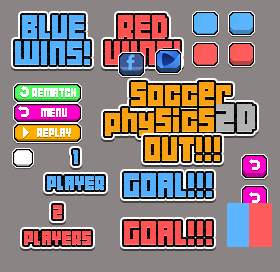
<style>
.page{position:relative;width:280px;height:272px;background:#8a8484}
.page>*{position:absolute;margin:0}
.t1{font:30px/26px "04b19";color:#53b0ff}
.t2{font:30px/26px "04b19";color:#ff5353}
.t3{font:11px "04b19";color:#fefefe}
.t4{font:30px/26px "04b19";color:#faa013}
.t5{font:36px/26px "04b19";color:#faa013}
.t6{font:36px/26px "04b19";color:#b1b1b1}
.t7{font:30px "04b19";color:#faa013}
.t8{font:18px/26px "04b19";color:#53b0ff}
.t9{font:30px "04b19";color:#53b0ff}
.t10{font:18px/26px "04b19";color:#ff5353}
.t11{font:30px "04b19";color:#ff5353}
</style>
<div class="page">
<p class="t1" style="left:15px;top:15px;width:75px;height:50px;text-align:center">BLUE<br>WINS!</p>
<p class="t1" style="left:15px;top:15px;width:75px;height:50px;text-align:center">BLUE<br>WINS!</p>
<p class="t2" style="left:105px;top:15px;width:75px;height:50px;text-align:center">RED<br>WINS!</p>
<p class="t2" style="left:105px;top:15px;width:75px;height:50px;text-align:center">RED<br>WINS!</p>
<p class="t3" style="left:32px;top:88px;width:44px;height:9px">REMATCH</p>
<p class="t4" style="left:105px;top:82px;width:150px;height:54px;text-align:center">Soccer<br>physics<span class="t5">2D</span></p>
<p class="t4" style="left:105px;top:82px;width:150px;height:54px;text-align:center">Soccer<br>physics<span class="t6">2D</span></p>
<p class="t3" style="left:41px;top:108px;width:26px;height:9px">MENU</p>
<p class="t3" style="left:37px;top:128px;width:34px;height:9px">REPLAY</p>
<p class="t7" style="left:145px;top:137px;width:75px;height:24px">OUT!!!</p>
<p class="t7" style="left:145px;top:137px;width:75px;height:24px">OUT!!!</p>
<p class="t8" style="left:47px;top:150px;width:57px;height:40px;text-align:center">1<br>PLAYER</p>
<p class="t8" style="left:47px;top:150px;width:57px;height:40px;text-align:center">1<br>PLAYER</p>
<p class="t9" style="left:124px;top:173px;width:88px;height:24px">GOAL!!!</p>
<p class="t9" style="left:124px;top:173px;width:88px;height:24px">GOAL!!!</p>
<p class="t10" style="left:24px;top:205px;width:67px;height:40px;text-align:center">2<br>PLAYERS</p>
<p class="t10" style="left:24px;top:205px;width:67px;height:40px;text-align:center">2<br>PLAYERS</p>
<p class="t11" style="left:124px;top:221px;width:88px;height:24px">GOAL!!!</p>
<p class="t11" style="left:124px;top:221px;width:88px;height:24px">GOAL!!!</p>
</div>
